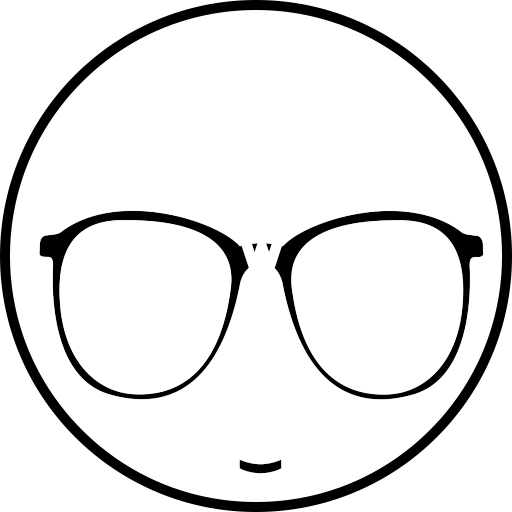
<style>
.page{position:relative;width:512px;height:512px;background:#ffffff}
.page>*{position:absolute;margin:0}
.t1{font:48px "Phosphate-Solid";color:#ffffff}
.t2{font:48px "Phosphate-Solid";color:#000000}
</style>
<div class="page">
<p class="t1" style="left:240px;top:241px;width:44px;height:32px">W</p>
<p class="t2" style="left:239px;top:459px;width:43px;height:15px;rotate:90deg">)</p>
</div>
